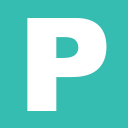
<style>
.page{position:relative;width:128px;height:128px;background:#35bdb2}
.page>*{position:absolute;margin:0}
.t1{font:130px "Arial-Black";color:#ffffff}
</style>
<div class="page">
<p class="t1" style="left:27px;top:18px;width:80px;height:93px">P</p>
</div>
